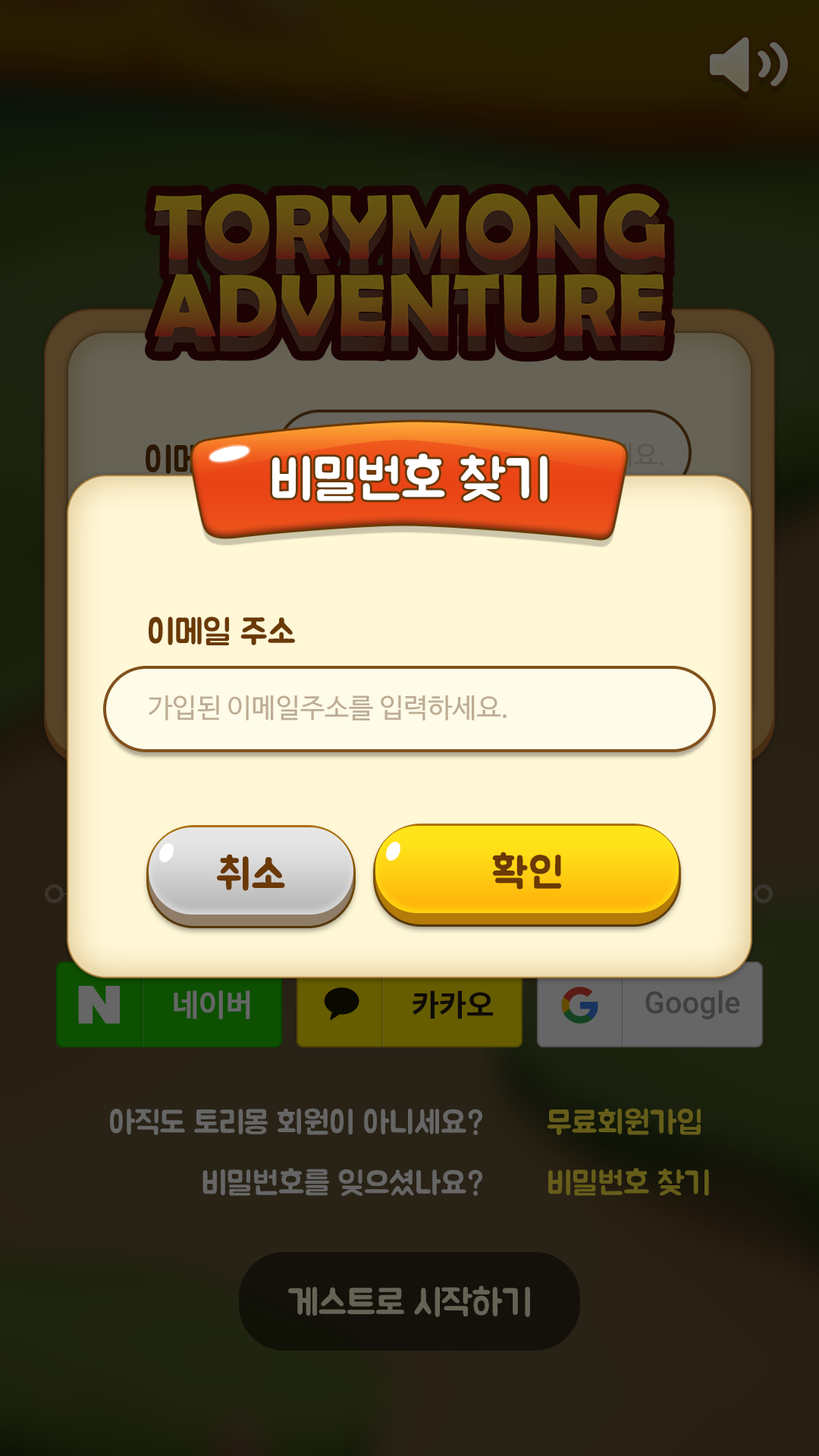
<style>
.page{position:relative;width:819px;height:1456px}
.page>*{position:absolute;margin:0}
.t1{font:36.4px "BMJUA"}
.t2{font:54.6px "BMJUA";color:#ffffff}
.t3{font:27.3px/144.1px "BMJUA"}
.t4{font:34.9px "BMJUA";color:#6a3906}
.t5{font:27.3px "NanumBarunGothic";color:#bdac95}
.t6{font:41.7px "BMJUA";color:#6a3906;font-weight:bold}
.t7{font:30.3px "NanumBarunGothicBold";color:#666666}
.t8{font:30.3px "NotoSansCJKkr-Bold";letter-spacing:-0.015em;color:#221815}
.t9{font:30.3px "Roboto-Medium";color:#40403f}
.t10{font:31.8px/60.7px "BMJUA";color:#666666}
.t11{font:31.8px/60.7px "BMJUA";color:#665d1a}
.t12{font:36.4px "BMJUA";color:#666356}
</style>
<div class="page">
<p class="t1" style="left:146px;top:444px;width:84px;height:31px">이메일</p>
<p class="t2" style="left:272px;top:453px;width:276px;height:48px">비밀번호 찾기</p>
<p class="t3" style="left:315px;top:504px;width:349px;height:169px">존재하지 않는 이메일주소입니다.<br>비밀번가 맞지 않습니다.(8자 숫자)</p>
<p class="t4" style="left:149px;top:617px;width:146px;height:28px">이메일 주소</p>
<p class="t5" style="left:148px;top:695px;width:359px;height:25px">가입된 이메일주소를 입력하세요.</p>
<p class="t6" style="left:217px;top:854px;width:68px;height:37px">취소</p>
<p class="t6" style="left:492px;top:852px;width:69px;height:38px">확인</p>
<p class="t7" style="left:174px;top:990px;width:76px;height:29px">네이버</p>
<p class="t8" style="left:413px;top:990px;width:80px;height:29px">카카오</p>
<p class="t9" style="left:645px;top:990px;width:95px;height:30px">Google</p>
<p class="t10" style="left:110px;top:1108px;width:372px;height:88px;text-align:right">아직도 토리몽 회원이 아니세요?<br>비밀번호를 잊으셨나요?</p>
<p class="t11" style="left:547px;top:1108px;width:162px;height:88px">무료회원가입<br>비밀번호 찾기</p>
<p class="t12" style="left:288px;top:1285px;width:242px;height:32px">게스트로 시작하기</p>
</div>
